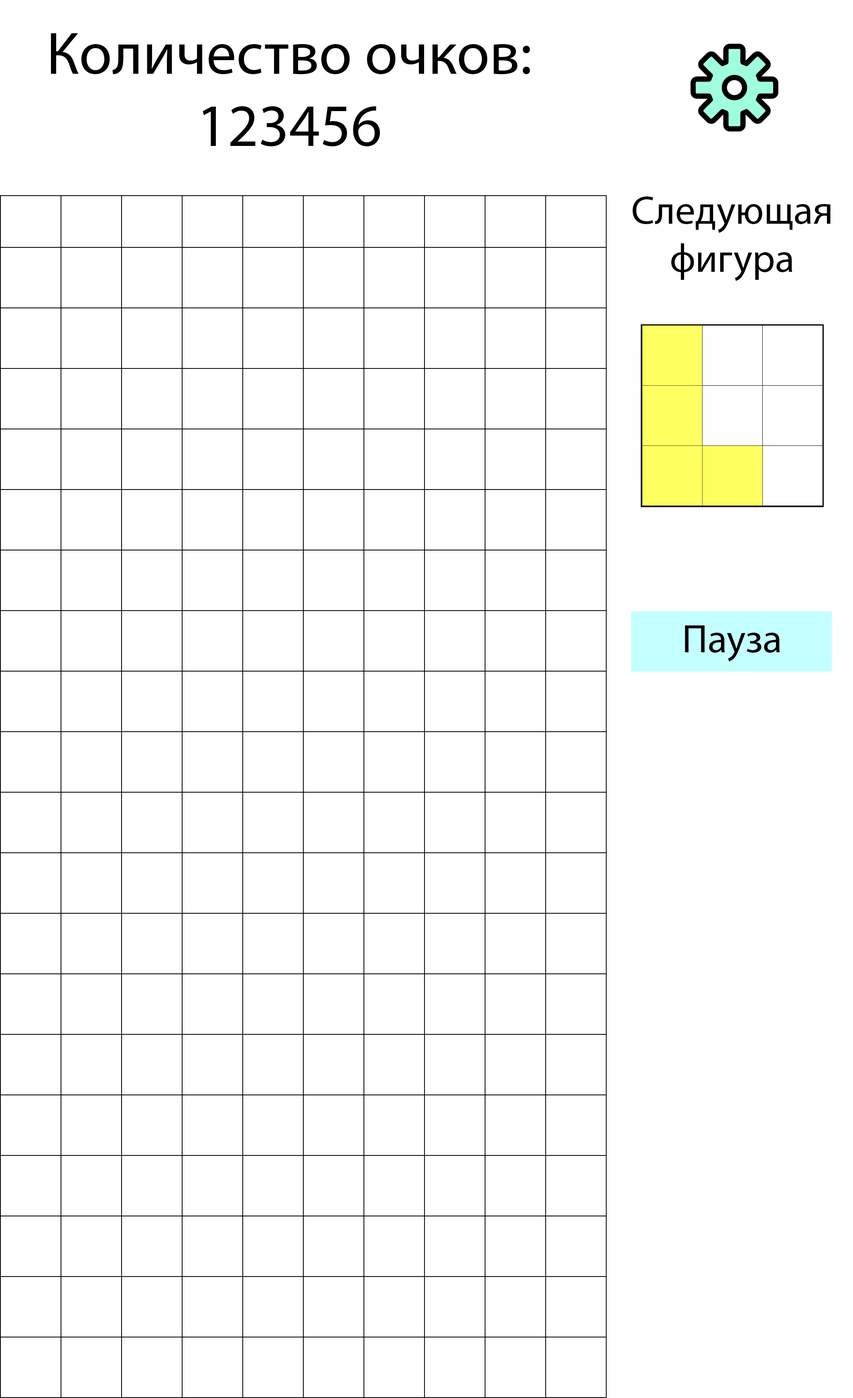
<style>
.page{position:relative;width:853px;height:1398px;background:#ffffff}
.page>*{position:absolute;margin:0}
.t1{font:60.2px "MyriadPro-Regular";color:#000000}
.t2{font:40.1px "MyriadPro-Regular";color:#000000}
</style>
<div class="page">
<p class="t1" style="left:51px;top:33px;width:479px;height:114px;text-align:center">Количество очков: 123456</p>
<p class="t2" style="left:632px;top:197px;width:198px;height:84px;text-align:center">Следующая фигура</p>
<p class="t2" style="left:685px;top:626px;width:95px;height:36px">Пауза</p>
</div>
